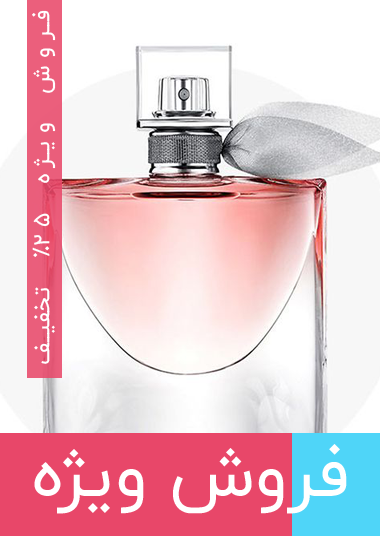
<style>
.page{position:relative;width:380px;height:560px;background:#ffffff}
.page>*{position:absolute;margin:0}
.t1{font:23px "IRANYekan";letter-spacing:0.32em;color:#ffffff}
.t2{font:69px "IRANYekan";color:#ffffff}
</style>
<div class="page">
<p class="t1" style="left:32px;top:10px;width:24px;height:354px;rotate:-90deg">فروش ویژه 25% تخفیف</p>
<p class="t2" style="left:34px;top:444px;width:313px;height:70px">فروش ویژه</p>
</div>
